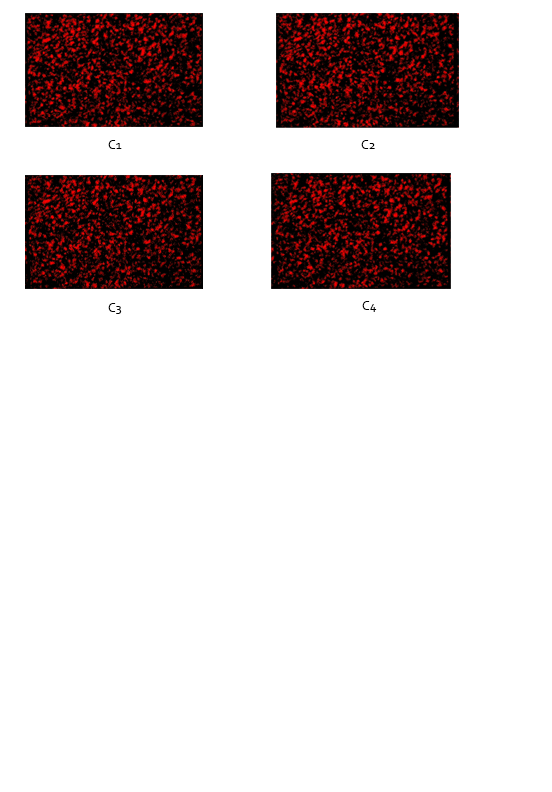
<style>
.page{position:relative;width:552px;height:792px;background:#ffffff}
.page>*{position:absolute;margin:0}
.t1{font:13px "Corbel";color:#000000}
</style>
<div class="page">
<p class="t1" style="left:108px;top:140px;width:14px;height:9px">C1</p>
<p class="t1" style="left:361px;top:140px;width:14px;height:9px">C2</p>
<p class="t1" style="left:108px;top:303px;width:14px;height:11px">C3</p>
<p class="t1" style="left:362px;top:301px;width:15px;height:11px">C4</p>
</div>
